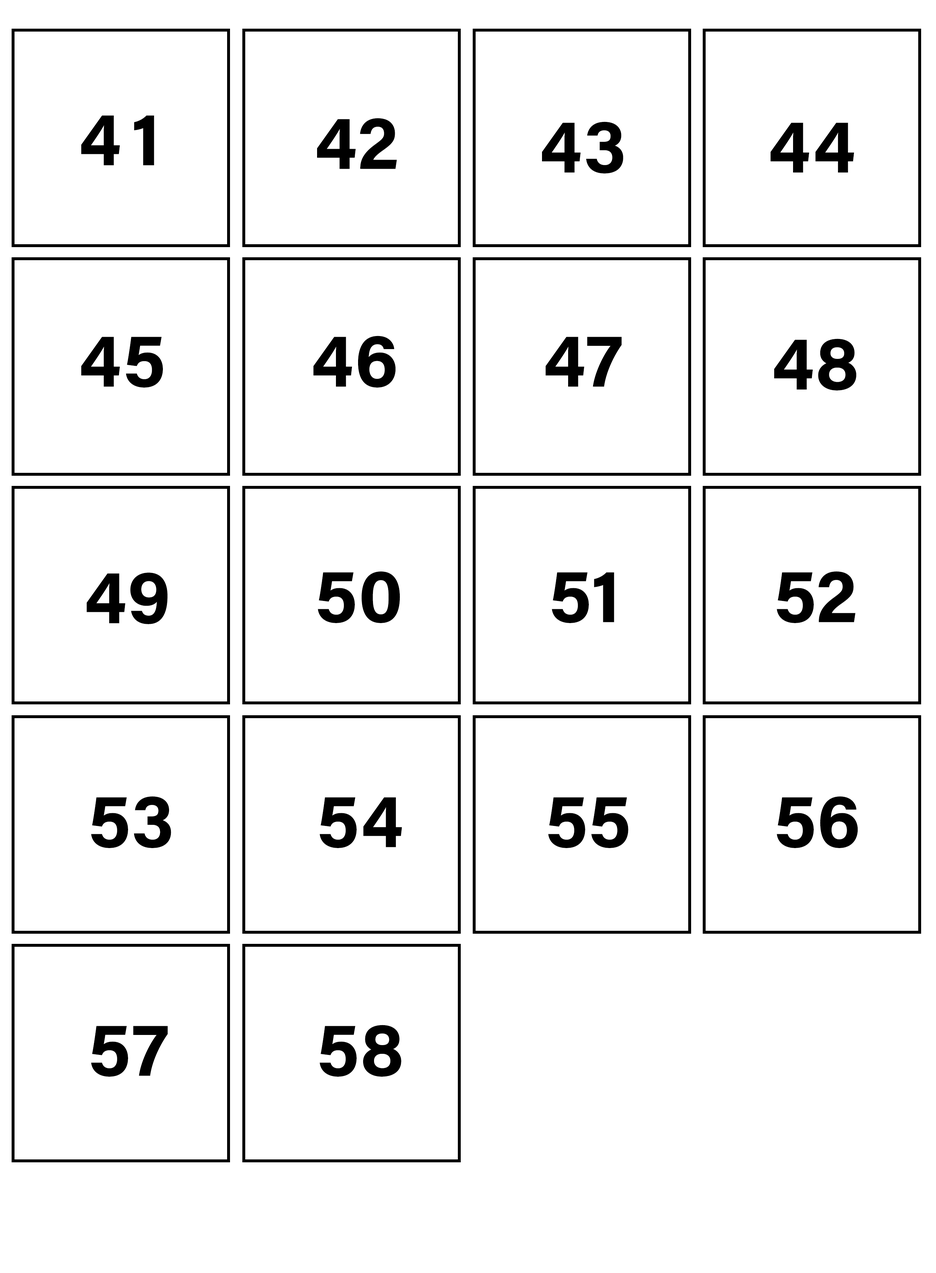
<style>
.page{position:relative;width:936px;height:1273px;background:#ffffff}
.page>*{position:absolute;margin:0}
.t1{font:75.5px "AcuminConcept-Bold";color:#000000}
</style>
<div class="page">
<p class="t1" style="left:81px;top:115px;width:73px;height:51px">4 1</p>
<p class="t1" style="left:317px;top:118px;width:80px;height:51px">42</p>
<p class="t1" style="left:542px;top:122px;width:82px;height:52px">43</p>
<p class="t1" style="left:771px;top:123px;width:83px;height:50px">44</p>
<p class="t1" style="left:81px;top:337px;width:82px;height:51px">45</p>
<p class="t1" style="left:314px;top:336px;width:82px;height:52px">46</p>
<p class="t1" style="left:546px;top:337px;width:76px;height:50px">47</p>
<p class="t1" style="left:775px;top:339px;width:82px;height:52px">48</p>
<p class="t1" style="left:87px;top:573px;width:81px;height:51px">49</p>
<p class="t1" style="left:318px;top:571px;width:82px;height:52px">50</p>
<p class="t1" style="left:552px;top:572px;width:63px;height:51px">51</p>
<p class="t1" style="left:777px;top:571px;width:79px;height:52px">52</p>
<p class="t1" style="left:91px;top:796px;width:80px;height:52px">53</p>
<p class="t1" style="left:320px;top:797px;width:82px;height:51px">54</p>
<p class="t1" style="left:548px;top:797px;width:81px;height:51px">55</p>
<p class="t1" style="left:777px;top:796px;width:81px;height:52px">56</p>
<p class="t1" style="left:320px;top:1025px;width:81px;height:52px">58</p>
<p class="t1" style="left:91px;top:1026px;width:77px;height:51px">57</p>
</div>
